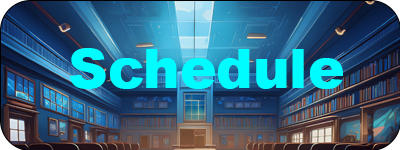
<style>
.page{position:relative;width:400px;height:150px}
.page>*{position:absolute;margin:0}
.t1{font:54.7px "Arial-Black";color:#00fcff}
</style>
<div class="page">
<p class="t1" style="left:69px;top:48px;width:274px;height:41px">Schedule</p>
</div>
